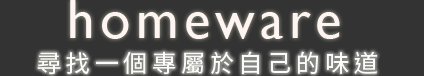
<style>
.page{position:relative;width:424px;height:76px;background:#333333}
.page>*{position:absolute;margin:0}
.t1{font:55px "GillSansMT";letter-spacing:0.1em;color:#fef4f2}
.t2{font:24px "NotoSansCJKtc-Regular";letter-spacing:0.2em;color:#fcfbfa}
</style>
<div class="page">
<p class="t1" style="left:70px;top:0px;width:270px;height:39px">homeware</p>
<p class="t2" style="left:37px;top:51px;width:340px;height:24px">尋找一個專屬於自己的味道</p>
</div>
